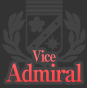
<style>
.page{position:relative;width:87px;height:88px;background:#333333}
.page>*{position:absolute;margin:0}
.t1{font:24px/12px "RyuminPro-ExBold";letter-spacing:-0.08em;color:#ff4b4f;scale:0.9 1}
.t2{font:15px/12px "RyuminPro-ExBold";letter-spacing:-0.08em;color:#ff4b4f;scale:0.9 1}
</style>
<div class="page">
<p class="t1" style="left:6px;top:50px;width:76px;height:32px;text-align:center"><span class="t2">Vice<br></span>Admiral</p>
</div>
